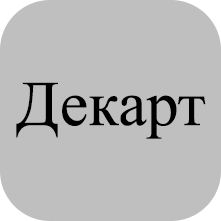
<style>
.page{position:relative;width:221px;height:221px;background:#bfbfbf}
.page>*{position:absolute;margin:0}
.t1{font:63.9px "TimesNewRomanPSMT";color:#000000}
</style>
<div class="page">
<p class="t1" style="left:16px;top:82px;width:190px;height:57px">Декарт</p>
</div>
